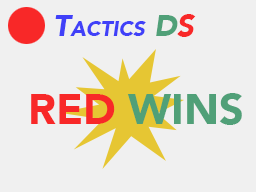
<style>
.page{position:relative;width:256px;height:192px;background:#f0f0f0}
.page>*{position:absolute;margin:0}
.t1{font:30px "Avenir-BlackOblique";color:#4040f8;font-variant:small-caps}
.t2{font:30px "Avenir-BlackOblique";color:#50a078;font-variant:small-caps}
.t3{font:30px "Avenir-BlackOblique";color:#f82828;font-variant:small-caps}
.t4{font:43px "Avenir-Black";color:#50a078;font-variant:small-caps}
.t5{font:43px "Avenir-Black";color:#f82828;font-variant:small-caps}
</style>
<div class="page">
<p class="t1" style="left:55px;top:14px;width:141px;height:23px">Tactics <span class="t2">D</span><span class="t3">S</span></p>
<p class="t4" style="left:31px;top:93px;width:211px;height:32px"><span class="t5">RED </span>WINS</p>
</div>
